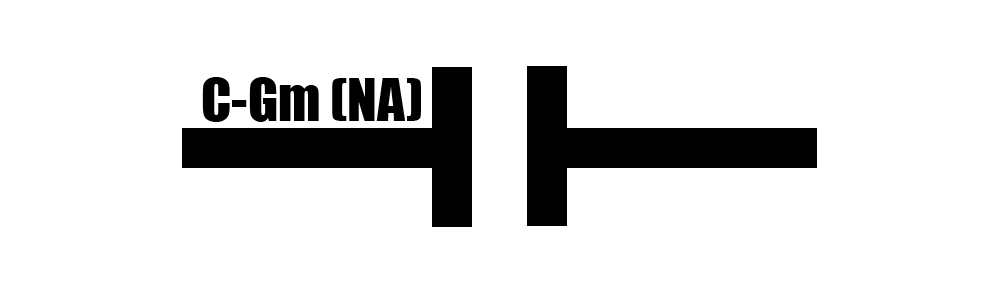
<style>
.page{position:relative;width:1000px;height:300px;background:#ffffff}
.page>*{position:absolute;margin:0}
.t1{font:55px "Impact";color:#000000}
</style>
<div class="page">
<p class="t1" style="left:202px;top:77px;width:219px;height:45px">C-Gm (NA)</p>
</div>
